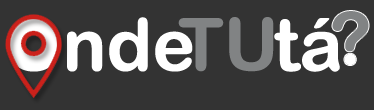
<style>
.page{position:relative;width:374px;height:110px;background:#333333}
.page>*{position:absolute;margin:0}
.t1{font:72px "ArialRoundedMTBold";letter-spacing:-0.02em;color:#ffffff;font-weight:bold}
.t2{font:72px "ArialRoundedMTBold";letter-spacing:-0.02em;color:#818384;font-weight:bold}
</style>
<div class="page">
<p class="t1" style="left:8px;top:17px;width:185px;height:55px">Onde</p>
<p class="t2" style="left:178px;top:17px;width:96px;height:55px">TU</p>
<p class="t1" style="left:274px;top:18px;width:66px;height:54px">tá</p>
</div>
